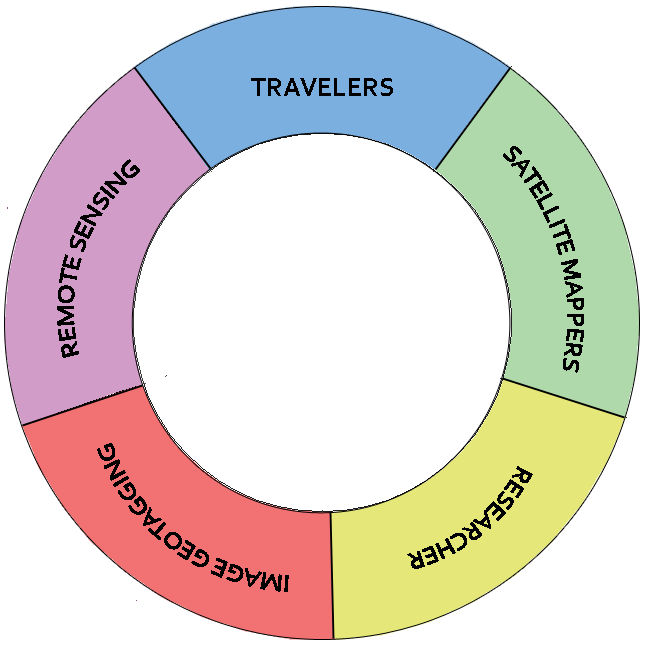
<style>
.page{position:relative;width:646px;height:647px;background:#ffffff}
.page>*{position:absolute;margin:0}
.t1{font:26.7px "Corbel-Bold";color:#000000}
.t2{font:24px "Corbel";color:#000000}
.t3{font:24px "Corbel";color:#010000}
</style>
<div class="page">
<p class="t1" style="left:251px;top:78px;width:142px;height:18px">TRAVELERS</p>
<p class="t2" style="left:503px;top:146px;width:81px;height:227px;rotate:74deg">SATELLITE MAPPERS</p>
<p class="t2" style="left:57px;top:159px;width:83px;height:199px;rotate:-71deg">REMOTE SENSING</p>
<p class="t2" style="left:97px;top:443px;width:192px;height:149px;rotate:-143deg">IMAGE GEOTAGGING</p>
<p class="t3" style="left:407px;top:466px;width:126px;height:103px;rotate:141deg">RESEARCHER</p>
</div>
